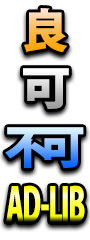
<style>
.page{position:relative;width:90px;height:240px;background:#ffffff}
.page>*{position:absolute;margin:0}
.t1{font:45.8px "KozGoPr6N-Heavy";letter-spacing:-0.04em}
.t2{font:45.8px "KozGoPr6N-Heavy";letter-spacing:-0.025em;scale:1.09 1}
.t3{font:45.8px "KozGoPr6N-Heavy";letter-spacing:-0.24em}
.t4{font:45.8px "KozGoPr6N-Heavy";letter-spacing:-0.04em;scale:0.59 1}
</style>
<div class="page">
<p class="t1" style="left:24px;top:8px;width:43px;height:45px">良</p>
<p class="t2" style="left:23px;top:68px;width:46px;height:41px">可</p>
<p class="t3" style="left:5px;top:127px;width:79px;height:41px">不可</p>
<p class="t4" style="left:6px;top:185px;width:79px;height:37px">AD-LIB</p>
</div>
